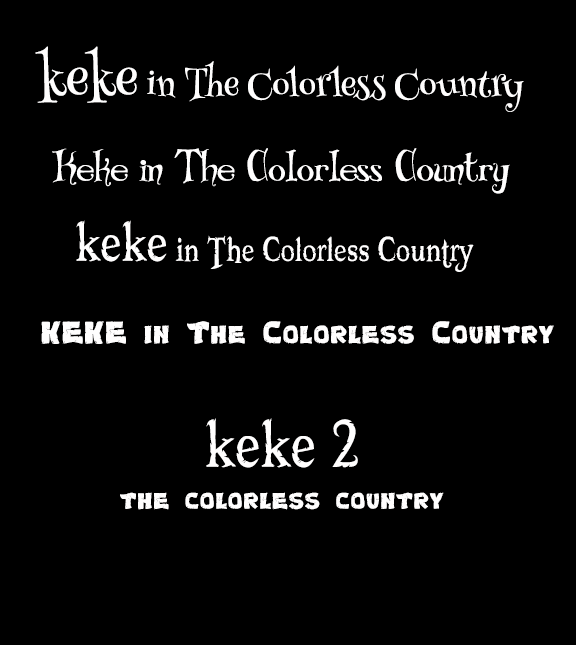
<style>
.page{position:relative;width:576px;height:645px;background:#000000}
.page>*{position:absolute;margin:0}
.t1{font:33.3px "HennyPenny-Regular";color:#fffefe}
.t2{font:50px "HennyPenny-Regular";color:#fffefe}
.t3{font:38.9px "Bibliotheque";color:#fffefe}
.t4{font:50px "Booter-ZeroZero";color:#fffefe}
.t5{font:83.3px "Booter-ZeroZero";color:#fffefe}
.t6{font:30.6px "Turtles";color:#fffefe}
.t7{font:27.8px "Turtles";color:#fffefe}
.t8{font:100px "Booter-ZeroZero";color:#fffefe}
</style>
<div class="page">
<p class="t1" style="left:35px;top:46px;width:489px;height:66px"><span class="t2">keke</span> in The Colorless Country</p>
<p class="t3" style="left:52px;top:148px;width:458px;height:46px">Keke in The Colorless Country</p>
<p class="t4" style="left:76px;top:220px;width:398px;height:52px"><span class="t5">keke</span> in The Colorless Country</p>
<p class="t6" style="left:41px;top:321px;width:513px;height:23px">KEKE in The Colorless Country</p>
<p class="t7" style="left:120px;top:418px;width:324px;height:92px;text-align:center"><span class="t8">keke 2<br></span>the colorless country</p>
</div>
